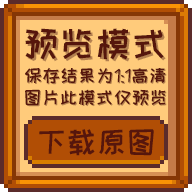
<style>
.page{position:relative;width:192px;height:192px;background:#ffcb7b}
.page>*{position:absolute;margin:0}
.t1{font:36px "HappyZcool-2016";color:#56160c}
.t2{font:36px "HappyZcool-2016"}
.t3{font:18px "HappyZcool-2016";color:#56160c}
.t4{font:18px "HappyZcool-2016"}
.t5{font:30px "HappyZcool-2016";color:#56160c}
</style>
<div class="page">
<p class="t1" style="left:25px;top:28px;width:139px;height:32px">预览模式</p>
<p class="t2" style="left:27px;top:30px;width:139px;height:32px">预览模式</p>
<p class="t3" style="left:25px;top:67px;width:141px;height:39px;text-align:center">保存结果为1:1高清<br>图片此模式仅预览</p>
<p class="t4" style="left:26px;top:68px;width:141px;height:39px;text-align:center">保存结果为1:1高清<br>图片此模式仅预览</p>
<p class="t5" style="left:39px;top:129px;width:115px;height:27px">下载原图</p>
</div>
